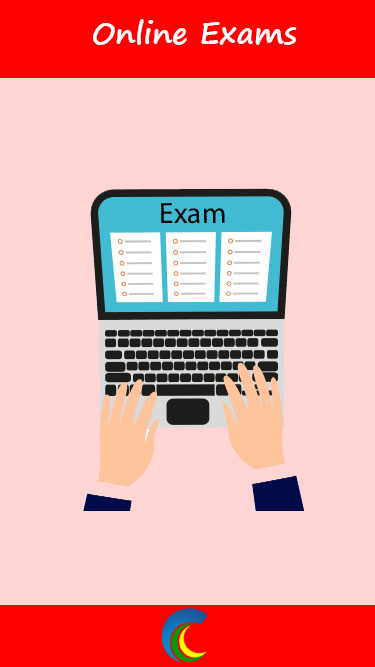
<style>
.page{position:relative;width:375px;height:667px;background:#ffd4d4}
.page>*{position:absolute;margin:0}
.t1{font:30px "SegoePrint-Bold";color:#ffffff}
</style>
<div class="page">
<p class="t1" style="left:93px;top:19px;width:204px;height:26px">Online Exams</p>
</div>
